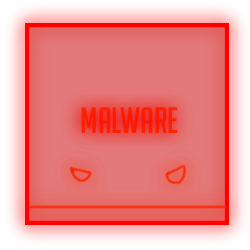
<style>
.page{position:relative;width:250px;height:250px}
.page>*{position:absolute;margin:0}
.t1{font:36px "BigNoodleTitling";color:#ff3000}
</style>
<div class="page">
<p class="t1" style="left:81px;top:107px;width:97px;height:26px">malware</p>
</div>
